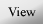
<style>
.page{position:relative;width:43px;height:24px}
.page>*{position:absolute;margin:0}
.t1{font:13px "TimesNewRomanPSMT";color:#060606}
</style>
<div class="page">
<p class="t1" style="left:8px;top:7px;width:28px;height:10px">View</p>
</div>
